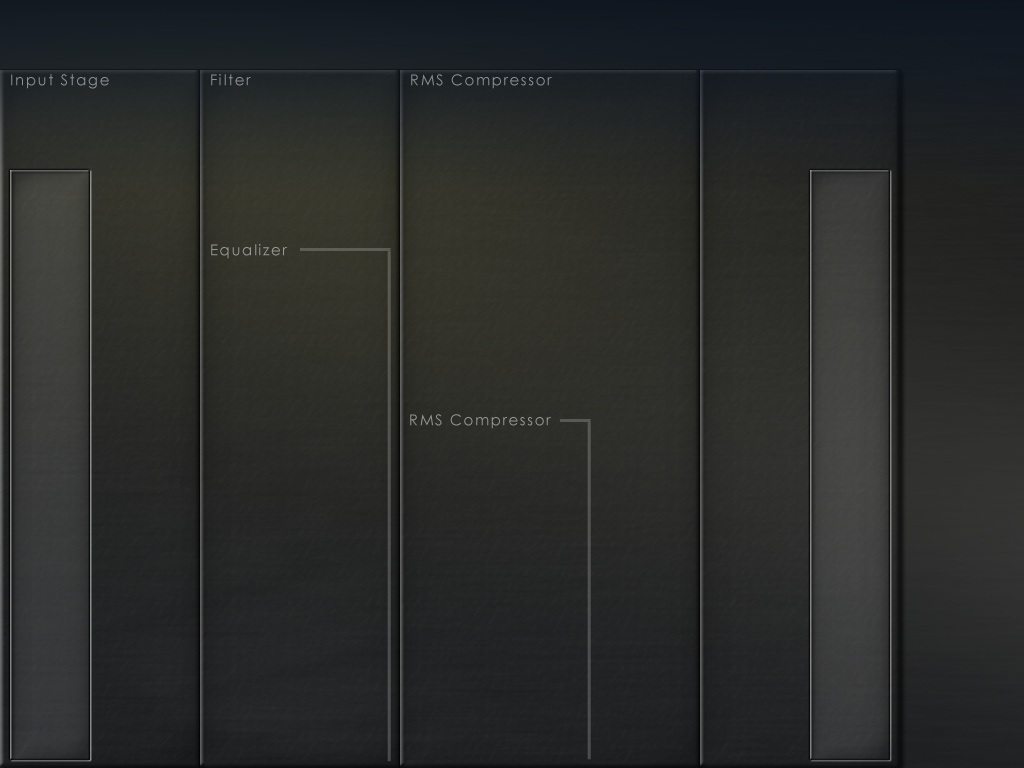
<style>
.page{position:relative;width:1024px;height:768px}
.page>*{position:absolute;margin:0}
.t1{font:15px "CenturyGothic";letter-spacing:0.105em;color:#8f9193}
.t2{font:15px "CenturyGothic";letter-spacing:0.105em;color:#8e9192}
.t3{font:15px "CenturyGothic";letter-spacing:0.105em;color:#8d9092}
.t4{font:15px "CenturyGothic";letter-spacing:0.105em;color:#9a9a95}
.t5{font:15px "CenturyGothic";letter-spacing:0.105em;color:#969794}
</style>
<div class="page">
<p class="t1" style="left:11px;top:74px;width:98px;height:15px">Input Stage</p>
<p class="t2" style="left:211px;top:74px;width:40px;height:12px">Filter</p>
<p class="t3" style="left:411px;top:74px;width:141px;height:15px">RMS Compressor</p>
<p class="t4" style="left:211px;top:244px;width:76px;height:15px">Equalizer</p>
<p class="t5" style="left:410px;top:414px;width:141px;height:15px">RMS Compressor</p>
</div>
